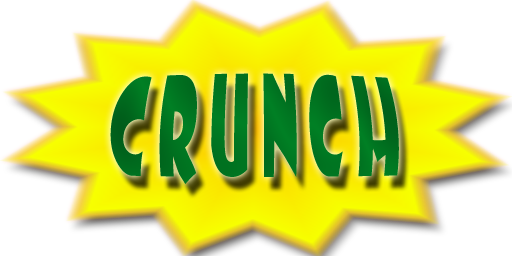
<style>
.page{position:relative;width:512px;height:256px;background:#ffffff}
.page>*{position:absolute;margin:0}
.t1{font:121.1px "ShowcardGothic-Reg";letter-spacing:0.2em;color:#007320;scale:0.44 1}
</style>
<div class="page">
<p class="t1" style="left:110px;top:73px;width:289px;height:111px">CRUNCH</p>
</div>
